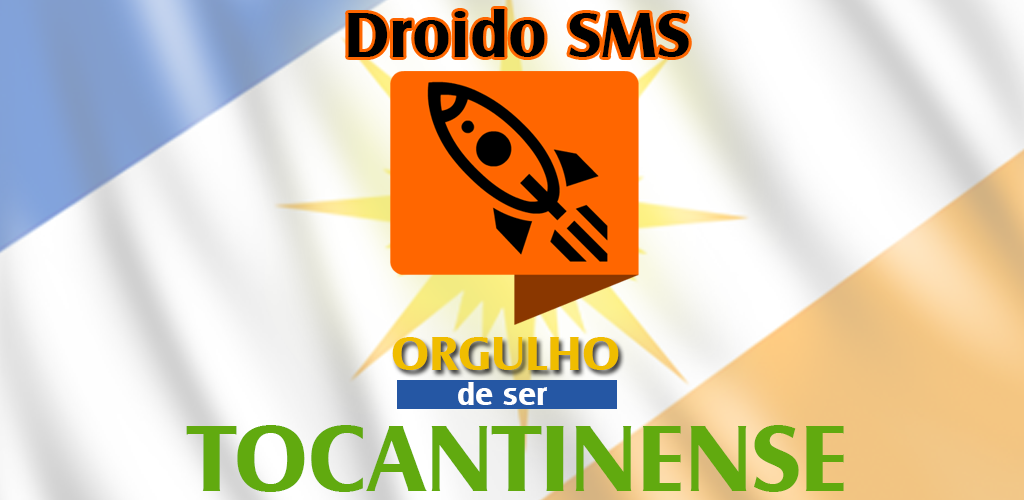
<style>
.page{position:relative;width:1024px;height:500px}
.page>*{position:absolute;margin:0}
.t1{font:66.5px "CastleT-Bold";color:#000000}
.t2{font:50px "CastleT-Bold";color:#f0bd00}
.t3{font:32.3px "CastleT-Bold";color:#ffffff}
.t4{font:97.8px "CastleT-Bold";color:#61aa0f}
</style>
<div class="page">
<p class="t1" style="left:348px;top:9px;width:341px;height:48px">Droido SMS</p>
<p class="t2" style="left:392px;top:337px;width:227px;height:33px">ORGULHO</p>
<p class="t3" style="left:458px;top:382px;width:89px;height:23px">de ser</p>
<p class="t4" style="left:186px;top:425px;width:658px;height:67px">TOCANTINENSE</p>
</div>
